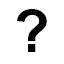
<style>
.page{position:relative;width:64px;height:64px;background:#ffffff}
.page>*{position:absolute;margin:0}
.t1{font:58.3px "Arial-BoldMT";color:#020200}
</style>
<div class="page">
<p class="t1" style="left:17px;top:9px;width:30px;height:43px">?</p>
</div>
